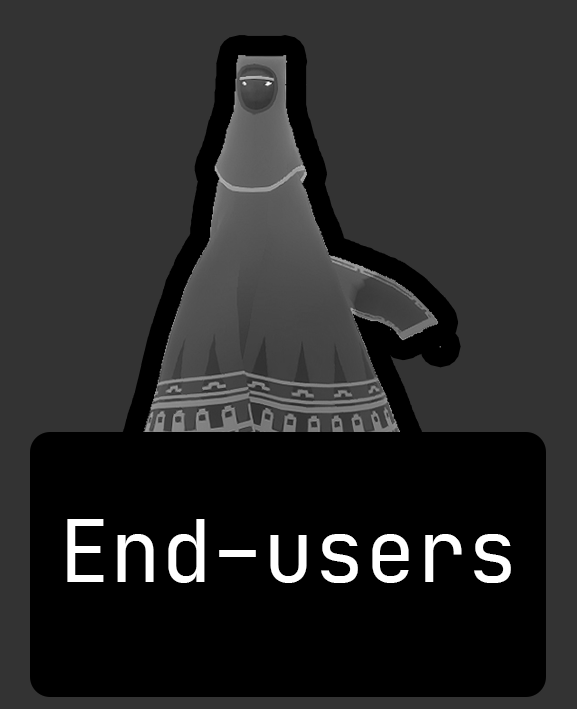
<style>
.page{position:relative;width:577px;height:709px;background:#333333}
.page>*{position:absolute;margin:0}
.t1{font:85px "JetBrainsMono-Regular";color:#ffffff}
</style>
<div class="page">
<p class="t1" style="left:67px;top:519px;width:444px;height:64px">End-users</p>
</div>
